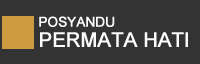
<style>
.page{position:relative;width:200px;height:64px;background:#333333}
.page>*{position:absolute;margin:0}
.t1{font:13.5px "ArialMT";letter-spacing:-0.02em;color:#fbfcfc;font-weight:bold}
.t2{font:20.3px "ArialMT";letter-spacing:-0.02em;color:#fbfcfc;font-weight:bold}
</style>
<div class="page">
<p class="t1" style="left:39px;top:16px;width:76px;height:11px">POSYANDU</p>
<p class="t2" style="left:40px;top:32px;width:148px;height:15px">PERMATA HATI</p>
</div>
